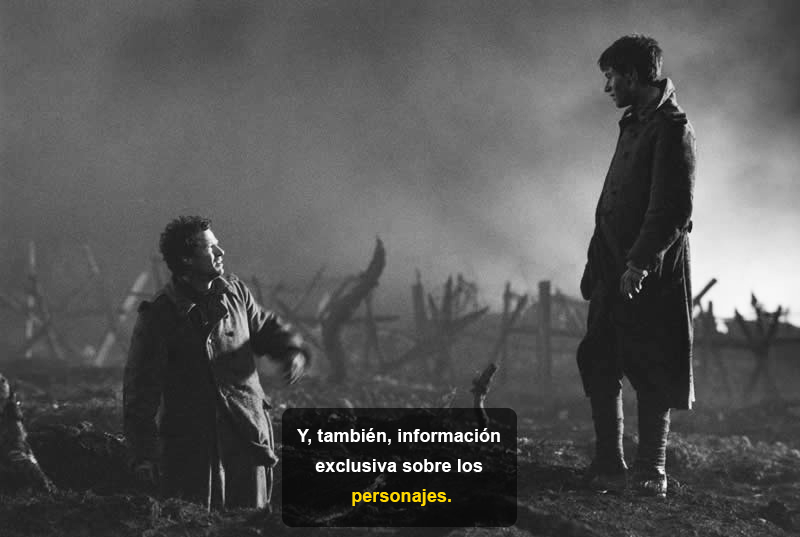
<style>
.page{position:relative;width:800px;height:537px}
.page>*{position:absolute;margin:0}
.t1{font:18px/30px "Arial-BoldMT";letter-spacing:0.005em;color:#ffffff}
.t2{font:18px/30px "Arial-BoldMT";letter-spacing:0.005em;color:#ffd800}
</style>
<div class="page">
<p class="t1" style="left:297px;top:428px;width:203px;height:78px;text-align:center">Y, también, información <br>exclusiva sobre los<span class="t2"> <br>personajes.</span></p>
</div>
